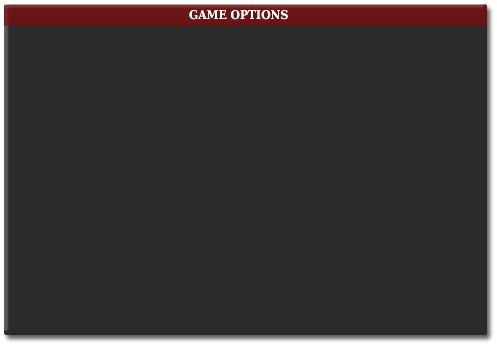
<style>
.page{position:relative;width:497px;height:345px;background:#2b2b2b}
.page>*{position:absolute;margin:0}
.t1{font:12px "DejaVuSerifCondensed-Bold";color:#fdfdfd}
</style>
<div class="page">
<p class="t1" style="left:189px;top:10px;width:99px;height:10px">GAME OPTIONS</p>
</div>
